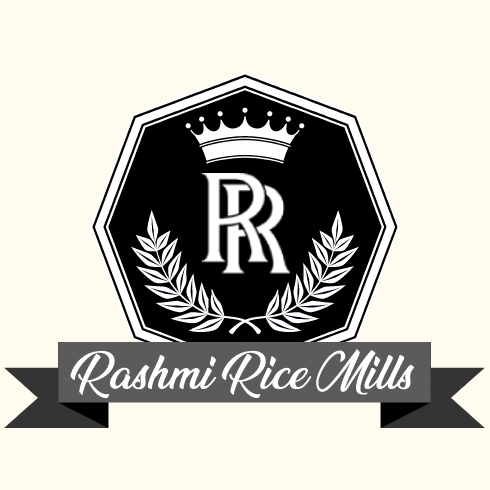
<style>
.page{position:relative;width:490px;height:490px;background:#fffbef}
.page>*{position:absolute;margin:0}
.t1{font:42px "AnandaBlackPersonalUse-Regular";color:#ffffff}
</style>
<div class="page">
<p class="t1" style="left:70px;top:349px;width:345px;height:50px">Rashmi Rice Mills</p>
</div>
